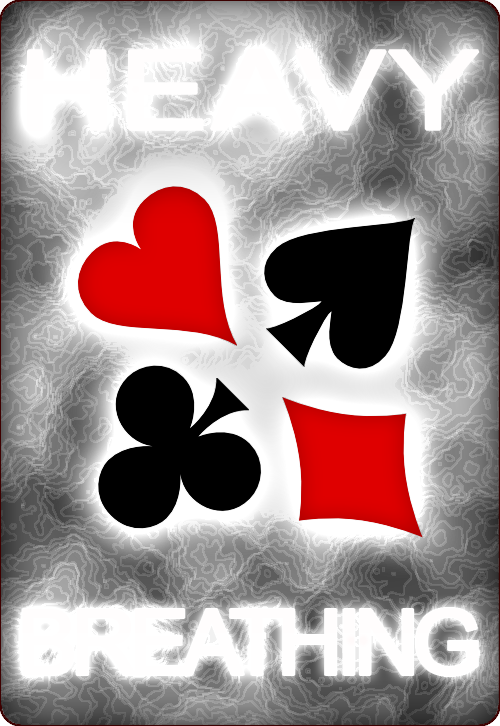
<style>
.page{position:relative;width:500px;height:726px}
.page>*{position:absolute;margin:0}
.t1{font:107.7px "ArialMT";color:#ffffff;font-weight:bold;scale:1.25 1}
.t2{font:89.8px "ArialMT";letter-spacing:-0.1em;color:#ffffff;font-weight:bold}
</style>
<div class="page">
<p class="t1" style="left:27px;top:49px;width:453px;height:82px">HEAVY</p>
<p class="t2" style="left:22px;top:608px;width:456px;height:68px">BREATHING</p>
</div>
